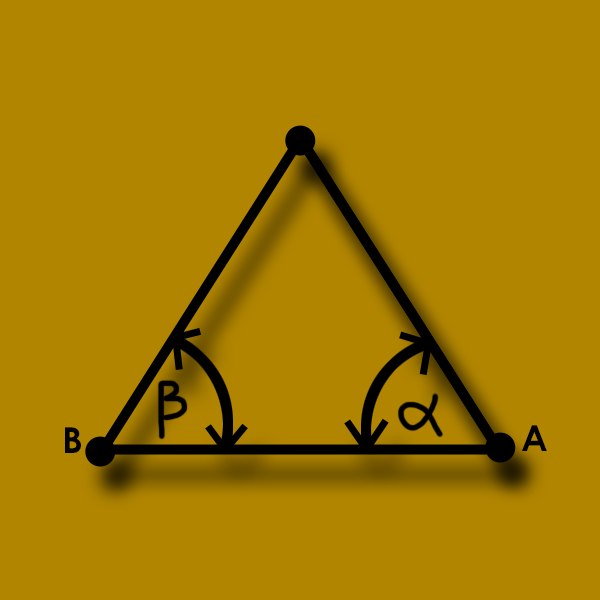
<style>
.page{position:relative;width:600px;height:600px;background:#b18500}
.page>*{position:absolute;margin:0}
.t1{font:35.9px "CenturyGothic-Bold";color:#000000}
</style>
<div class="page">
<p class="t1" style="left:522px;top:425px;width:25px;height:26px">A</p>
<p class="t1" style="left:65px;top:427px;width:16px;height:26px">B</p>
</div>
